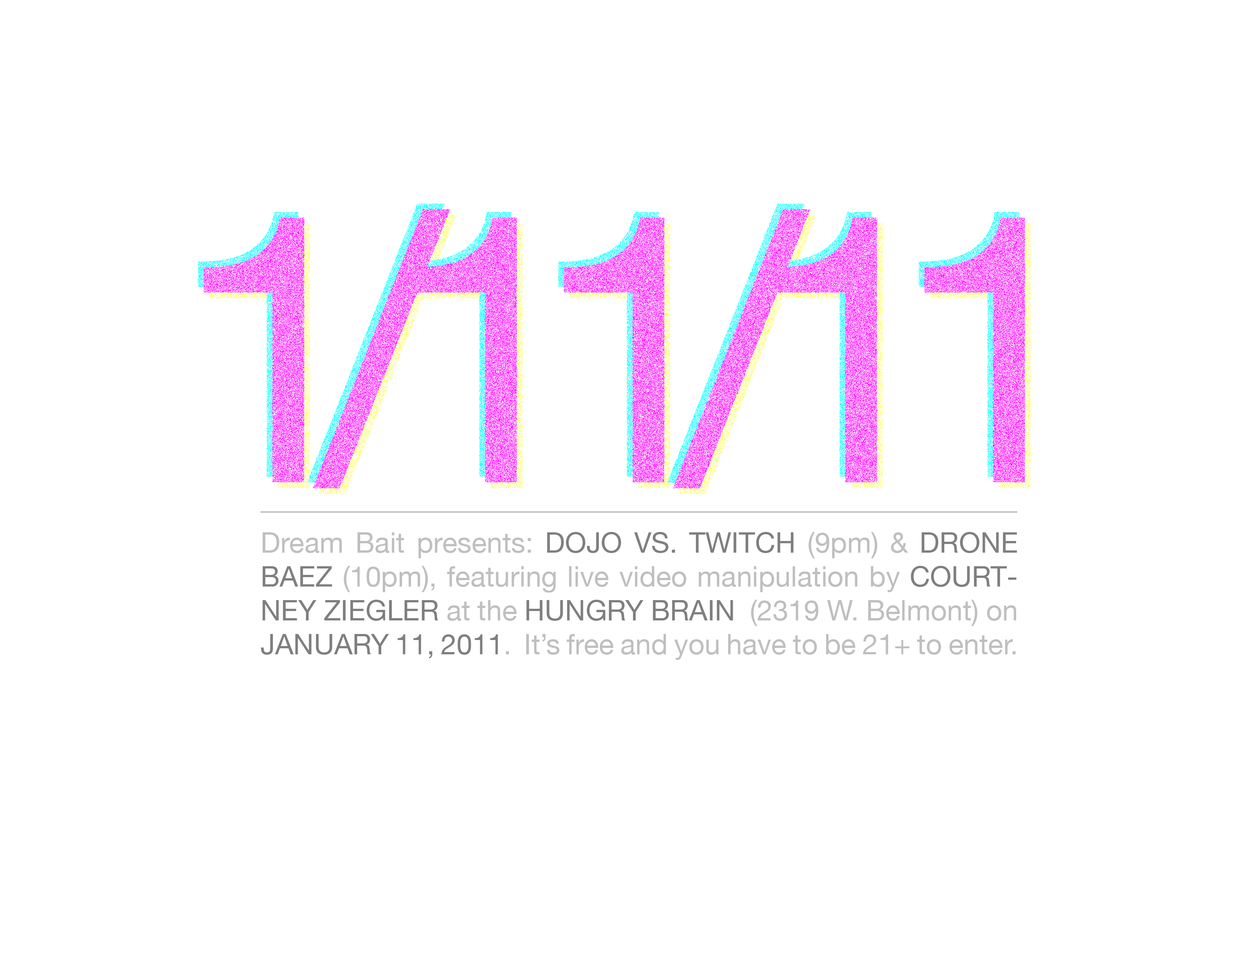
<style>
.page{position:relative;width:1242px;height:960px;background:#ffffff}
.page>*{position:absolute;margin:0}
.t1{font:373.4px "HelveticaNeue";letter-spacing:-0.16em;text-transform:uppercase}
.t2{font:28.2px "HelveticaNeue";color:#bfbfbf}
.t3{font:28.2px "HelveticaNeue";color:#808080}
.t4{font:28.2px "HelveticaNeue";color:#808080;text-transform:uppercase}
</style>
<div class="page">
<p class="t1" style="left:198px;top:204px;width:822px;height:279px">1/11/11</p>
<p class="t1" style="left:204px;top:209px;width:821px;height:279px">1/11/11</p>
<p class="t1" style="left:209px;top:215px;width:822px;height:279px">1/11/11</p>
<p class="t2" style="left:261px;top:532px;width:756px;height:128px;text-align:justify">Dream Bait presents: <span class="t3">DOJO VS. TWITCH</span> (9pm) &amp; <span class="t3">DRONE BAEZ</span> (10pm), featuring live video manipulation by <span class="t4">Courtney Ziegler </span>at the <span class="t4">Hungry Brain </span> (2319 W. Belmont) on <span class="t4">January </span><span class="t3">11, 2011</span>.  It’s free and you have to be 21+ to enter.</p>
</div>
